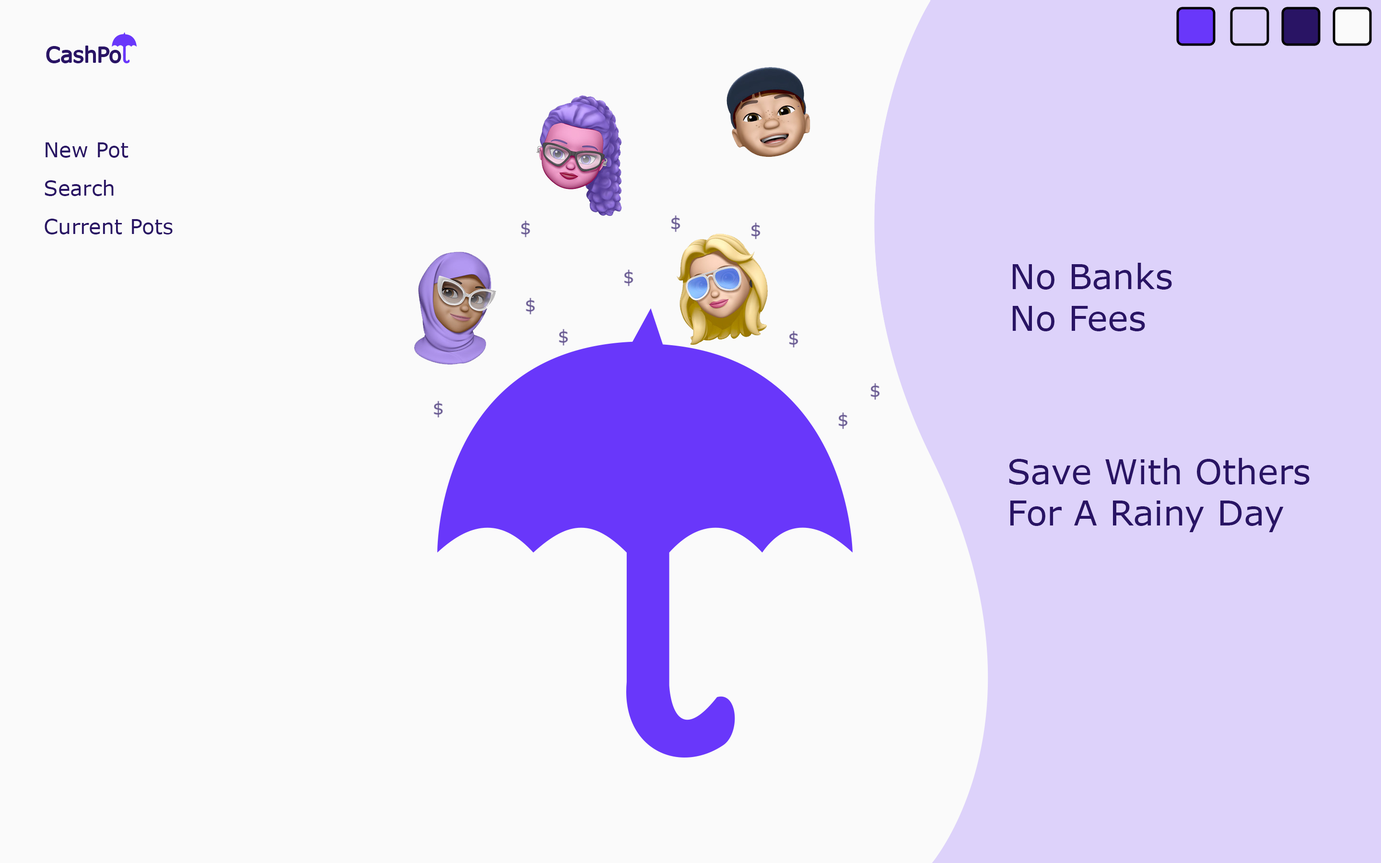
<style>
.page{position:relative;width:1381px;height:863px;background:#fafafa}
.page>*{position:absolute;margin:0}
.t1{font:20.9px "MSReferenceSansSerif";color:#291464}
.t2{font:20.7px "MSReferenceSansSerif";color:#291464}
.t3{font:34.5px "MSReferenceSansSerif";color:#291464}
</style>
<div class="page">
<p class="t1" style="left:47px;top:46px;width:74px;height:17px">CashPo</p>
<p class="t2" style="left:46px;top:142px;width:83px;height:16px">New Pot</p>
<p class="t2" style="left:45px;top:180px;width:69px;height:16px">Search</p>
<p class="t2" style="left:45px;top:219px;width:128px;height:16px">Current Pots</p>
<p class="t3" style="left:1013px;top:263px;width:159px;height:68px">No Banks<br>No Fees</p>
<p class="t3" style="left:1009px;top:458px;width:301px;height:74px">Save With Others<br>For A Rainy Day</p>
</div>
